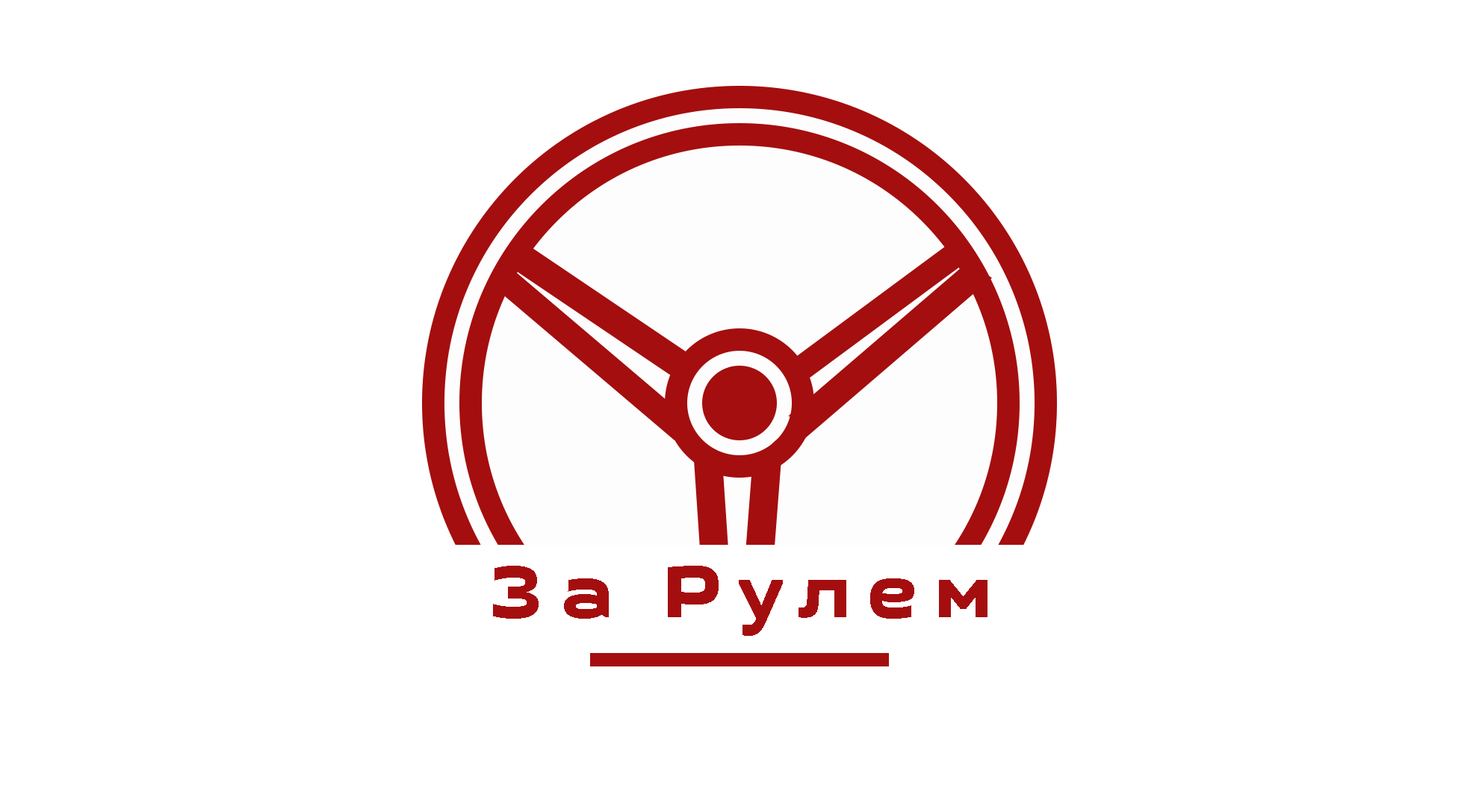
<style>
.page{position:relative;width:1479px;height:806px;background:#ffffff}
.page>*{position:absolute;margin:0}
.t1{font:74.7px "GetVoIPGrotesque";letter-spacing:0.2em;color:#a40e0e}
</style>
<div class="page">
<p class="t1" style="left:493px;top:566px;width:494px;height:70px">За Рулем</p>
</div>
